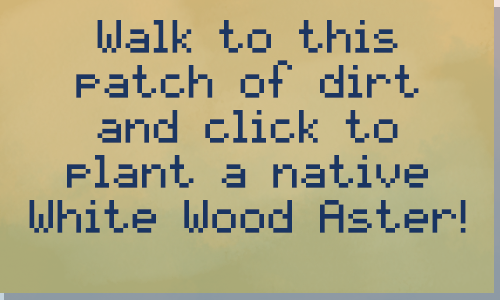
<style>
.page{position:relative;width:500px;height:300px}
.page>*{position:absolute;margin:0}
.t1{font:37.5px "pixelmix";color:#1f3e71}
</style>
<div class="page">
<p class="t1" style="left:29px;top:20px;width:437px;height:213px;text-align:center">Walk to this patch of dirt and click to plant a native White Wood Aster!</p>
</div>
